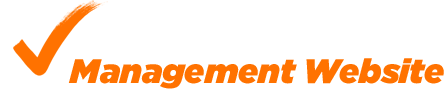
<style>
.page{position:relative;width:444px;height:89px;background:#ffffff}
.page>*{position:absolute;margin:0}
.t1{font:34px "Gotham-UltraItalic";color:#ff7200}
</style>
<div class="page">
<p class="t1" style="left:68px;top:58px;width:376px;height:31px">Management Website</p>
</div>
